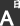
<style>
.page{position:relative;width:20px;height:26px;background:#333333}
.page>*{position:absolute;margin:0}
.t1{font:12px "DFKaiShu-SB-Estd-BF";color:#ffffff;font-weight:bold}
.t2{font:20px "ArialMT";color:#ffffff;font-weight:bold}
</style>
<div class="page">
<p class="t1" style="left:14px;top:0px;width:7px;height:9px">日</p>
<p class="t2" style="left:0px;top:10px;width:14px;height:16px">A</p>
</div>
